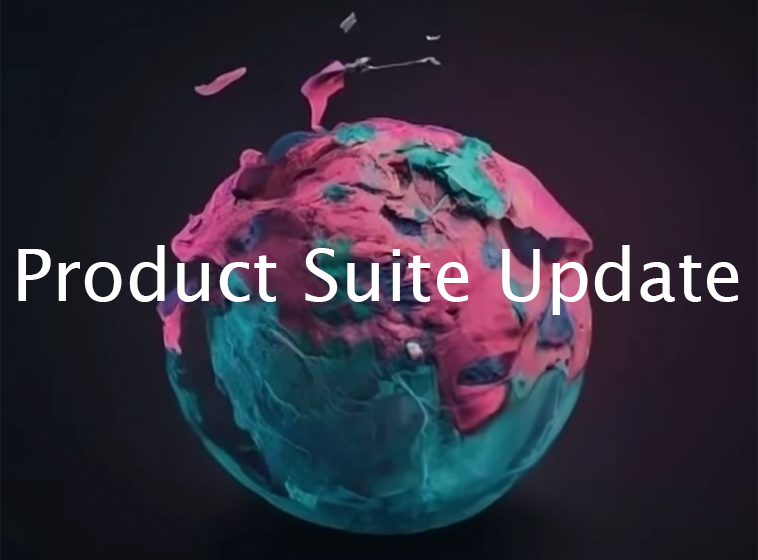
<style>
.page{position:relative;width:758px;height:560px}
.page>*{position:absolute;margin:0}
.t1{font:72px "LucidaSans";color:#ffffff}
</style>
<div class="page">
<p class="t1" style="left:18px;top:245px;width:721px;height:70px">Product Suite Update</p>
</div>
